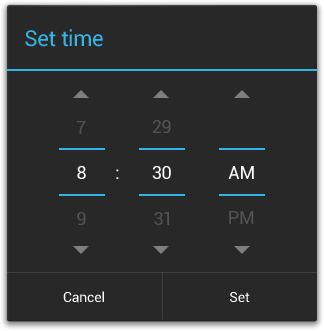
<style>
.page{position:relative;width:324px;height:331px;background:#282828}
.page>*{position:absolute;margin:0}
.t1{font:22px "Roboto-Regular";letter-spacing:-0.005em;color:#33b5e5}
.t2{font:18px "Roboto-Regular";letter-spacing:-0.005em;color:#535353}
.t3{font:18px "Roboto-Regular";letter-spacing:-0.005em;color:#ffffff}
.t4{font:14px "Roboto-Regular";letter-spacing:-0.005em;color:#ffffff}
</style>
<div class="page">
<p class="t1" style="left:25px;top:29px;width:78px;height:18px">Set time</p>
<p class="t2" style="left:76px;top:121px;width:10px;height:13px">7</p>
<p class="t2" style="left:153px;top:120px;width:18px;height:13px">29</p>
<p class="t3" style="left:77px;top:166px;width:9px;height:13px">8</p>
<p class="t3" style="left:116px;top:169px;width:3px;height:10px">:</p>
<p class="t3" style="left:152px;top:166px;width:19px;height:13px">30</p>
<p class="t3" style="left:228px;top:166px;width:26px;height:13px">AM</p>
<p class="t2" style="left:77px;top:212px;width:9px;height:13px">9</p>
<p class="t2" style="left:154px;top:212px;width:15px;height:13px">31</p>
<p class="t2" style="left:229px;top:211px;width:25px;height:13px">PM</p>
<p class="t4" style="left:63px;top:291px;width:41px;height:12px">Cancel</p>
<p class="t4" style="left:230px;top:292px;width:20px;height:10px">Set</p>
</div>
